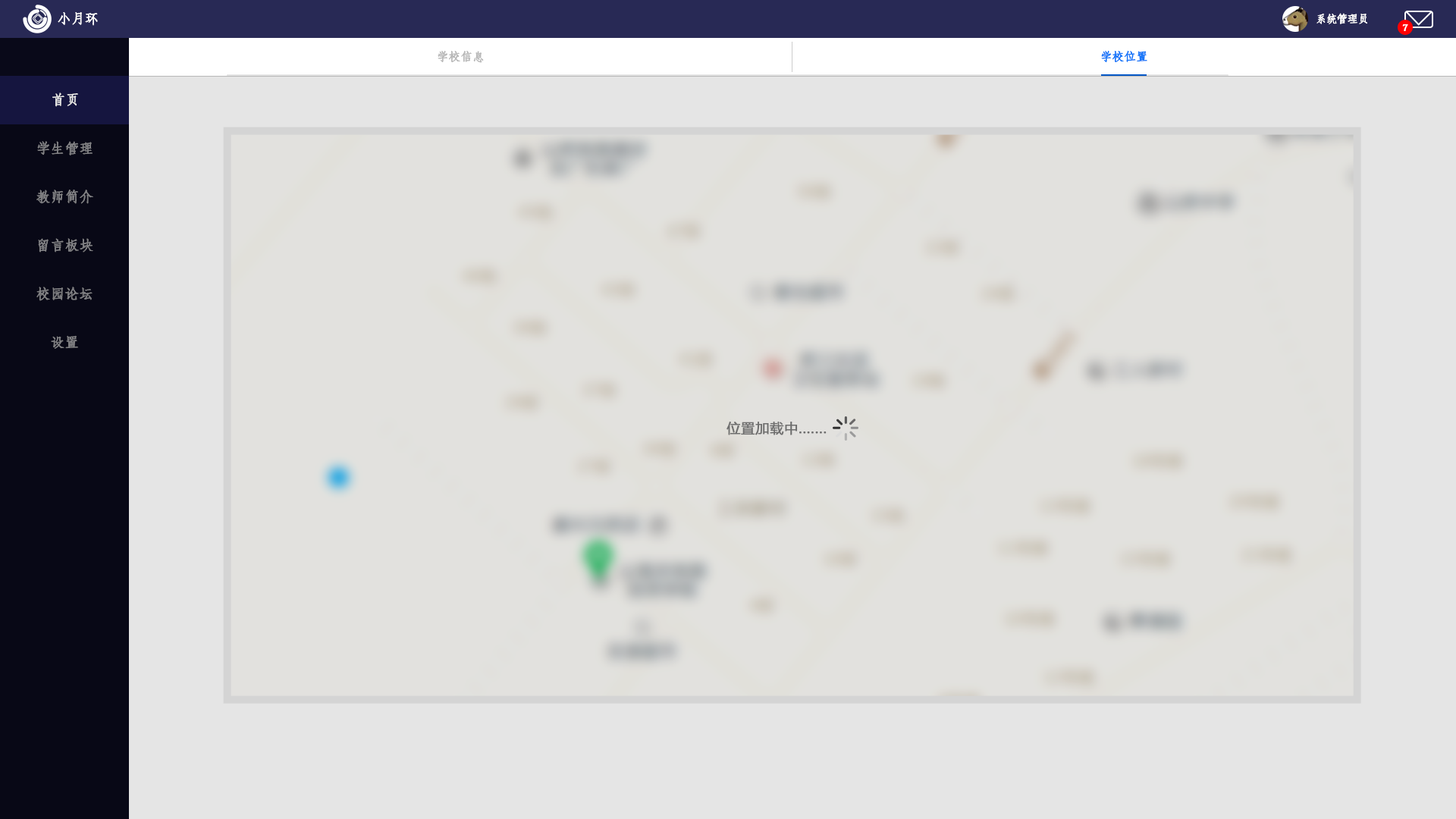
<style>
.page{position:relative;width:1456px;height:819px;background:#e2e1de}
.page>*{position:absolute;margin:0}
.t1{font:13.4px "AdobeFangsongStd-Regular";color:#ffffff;font-weight:bold}
.t2{font:10.6px "AdobeFangsongStd-Regular";color:#ffffff;font-weight:bold}
.t3{font:9.1px "AdobeFangsongStd-Regular";color:#ffffff;font-weight:bold}
.t4{font:11.4px "AdobeFangsongStd-Regular";color:#b8b8b8;font-weight:bold}
.t5{font:11.4px "AdobeFangsongStd-Regular";color:#1576f9;font-weight:bold}
.t6{font:13.6px "AdobeFangsongStd-Regular";color:#e5e5e5;font-weight:bold}
.t7{font:13.6px "AdobeFangsongStd-Regular";color:#808083;font-weight:bold}
.t8{font:13.6px "MicrosoftYaHei";color:#6d6d6d;font-weight:bold}
</style>
<div class="page">
<p class="t1" style="left:58px;top:12px;width:40px;height:14px">小月环</p>
<p class="t2" style="left:1316px;top:13px;width:51px;height:11px">系统管理员</p>
<p class="t3" style="left:1402px;top:24px;width:6px;height:7px">7</p>
<p class="t4" style="left:438px;top:51px;width:46px;height:12px">学校信息</p>
<p class="t5" style="left:1101px;top:51px;width:46px;height:11px">学校位置</p>
<p class="t6" style="left:52px;top:93px;width:26px;height:14px">首页</p>
<p class="t7" style="left:37px;top:141px;width:56px;height:14px">学生管理</p>
<p class="t7" style="left:36px;top:190px;width:57px;height:14px">教师简介</p>
<p class="t7" style="left:38px;top:238px;width:55px;height:15px">留言板块</p>
<p class="t7" style="left:36px;top:287px;width:57px;height:14px">校园论坛</p>
<p class="t7" style="left:51px;top:335px;width:27px;height:14px">设置</p>
<p class="t8" style="left:726px;top:421px;width:101px;height:14px">位置加载中.......</p>
</div>
